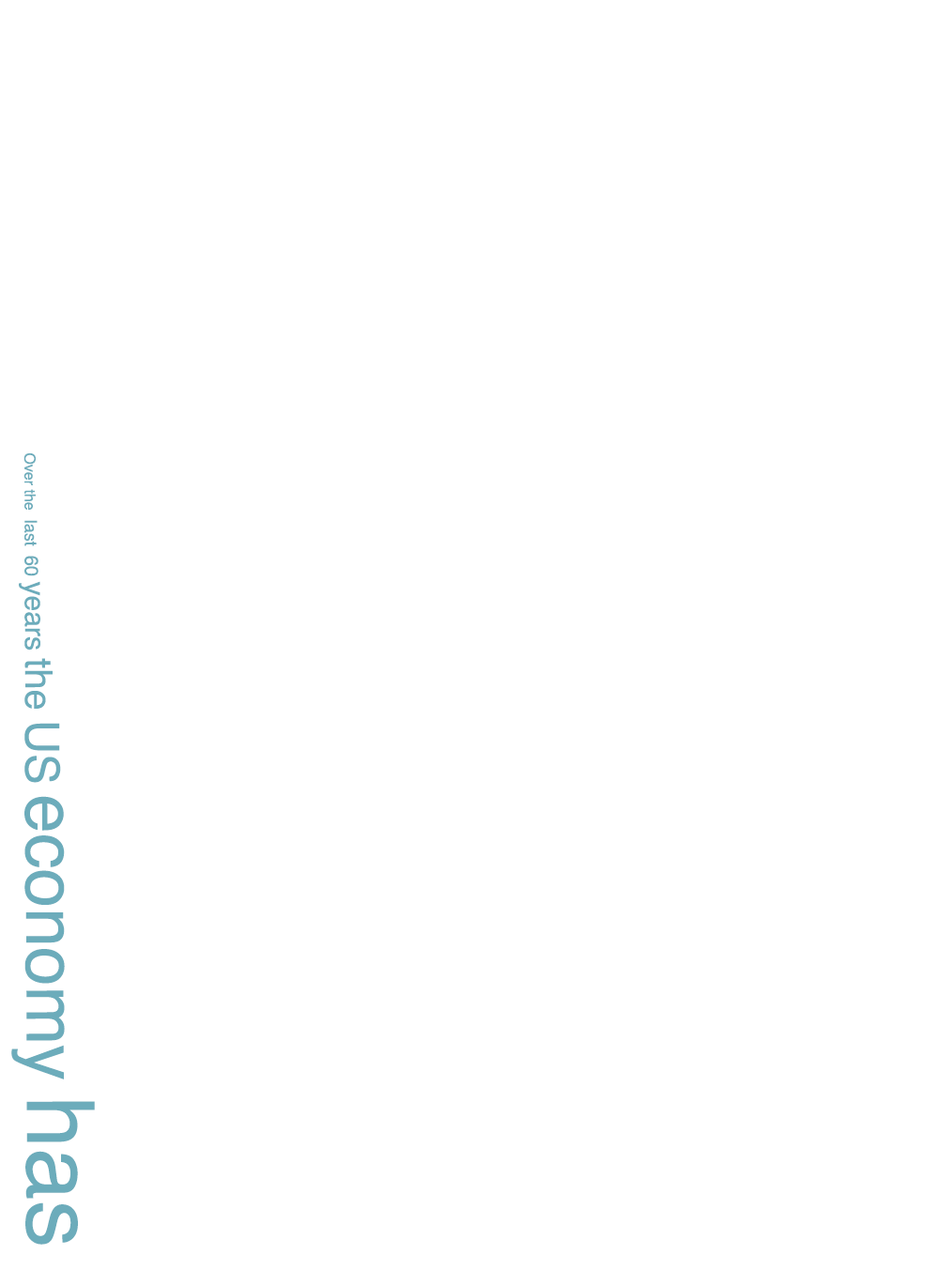
<style>
.page{position:relative;width:939px;height:1270px;background:#ffffff}
.page>*{position:absolute;margin:0}
.t1{font:15px "Helvetica";color:#6cacbb}
.t2{font:16.9px "Helvetica";color:#6cacbb}
.t3{font:18.8px "Helvetica";color:#6cacbb}
.t4{font:28.2px "Helvetica";color:#6cacbb}
.t5{font:37.6px "Helvetica";color:#6cacbb}
.t6{font:46.9px "Helvetica";color:#6cacbb}
.t7{font:70.4px "Helvetica";color:#6cacbb}
.t8{font:93.9px "Helvetica";color:#6cacbb}
</style>
<div class="page">
<p class="t1" style="left:11px;top:452px;width:84px;height:793px;rotate:90deg">Over the <span class="t2">last </span><span class="t3">60 </span><span class="t4">years </span><span class="t5">the </span><span class="t6">US </span><span class="t7">economy </span><span class="t8">has</span></p>
</div>
